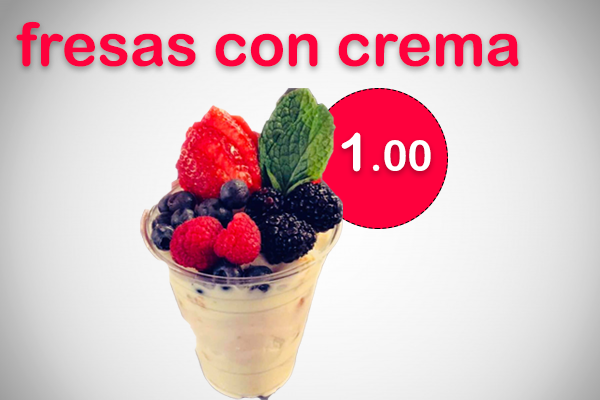
<style>
.page{position:relative;width:600px;height:400px}
.page>*{position:absolute;margin:0}
.t1{font:60px "ArialRoundedMTBold";color:#fe013d}
.t2{font:41.9px "ArialRoundedMTBold";color:#ffffff}
.t3{font:52.3px "ArialRoundedMTBold";color:#ffffff}
</style>
<div class="page">
<p class="t1" style="left:16px;top:21px;width:503px;height:46px">fresas con crema</p>
<p class="t2" style="left:341px;top:132px;width:90px;height:40px"><span class="t3">1</span>.00</p>
</div>
